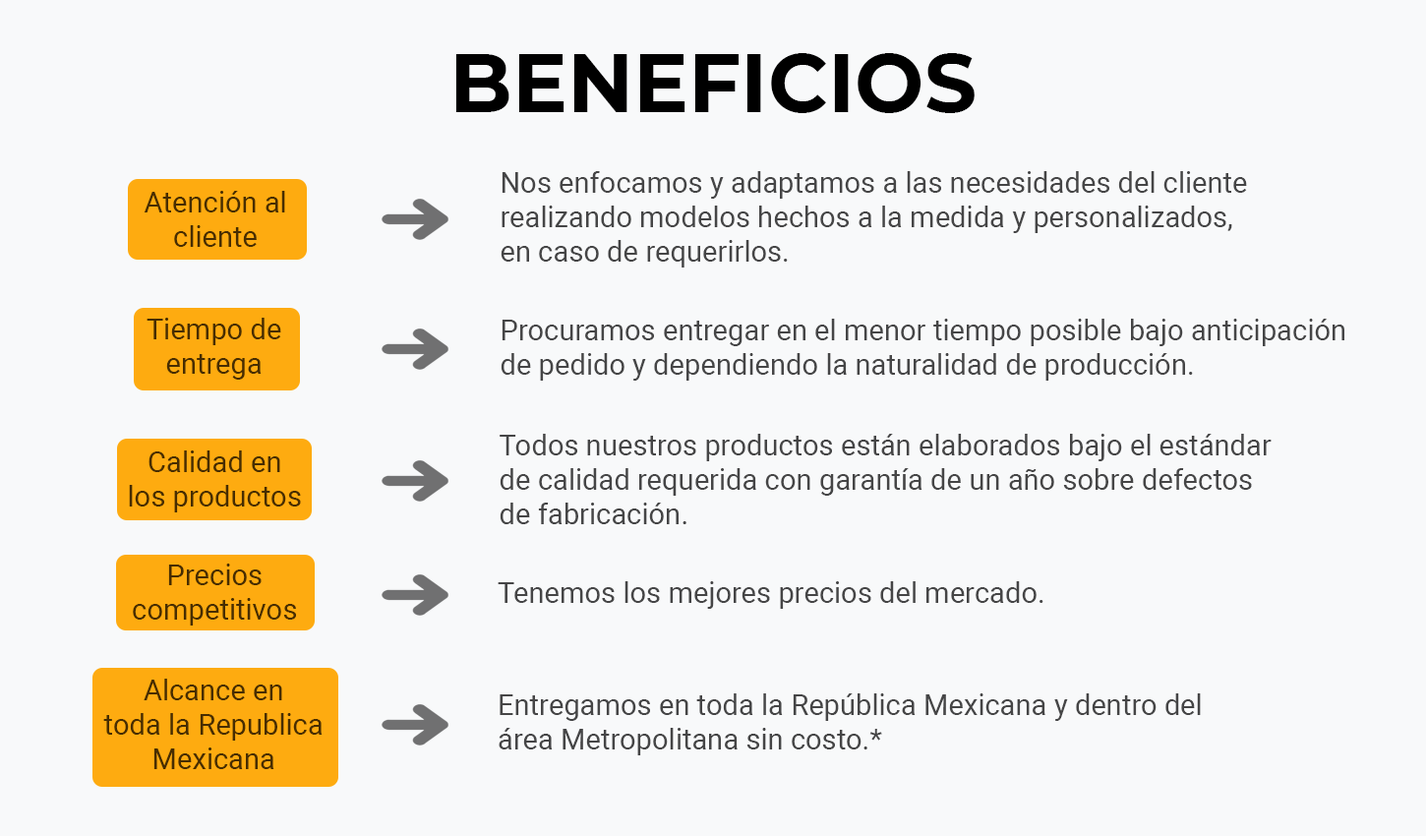
<style>
.page{position:relative;width:1426px;height:836px;background:#f8f9fa}
.page>*{position:absolute;margin:0}
.t1{font:82px "Montserrat-Bold";color:#000000}
.t2{font:28.7px "Roboto-Regular";color:#454546}
.t3{font:28.7px "Roboto-Regular";color:#472d02}
</style>
<div class="page">
<p class="t1" style="left:455px;top:53px;width:520px;height:60px">BENEFICIOS</p>
<p class="t2" style="left:501px;top:171px;width:746px;height:97px">Nos enfocamos y adaptamos a las necesidades del cliente<br>realizando modelos hechos a la medida y personalizados,<br>en caso de requerirlos.</p>
<p class="t3" style="left:144px;top:191px;width:141px;height:56px;text-align:center">Atención al<br>cliente</p>
<p class="t3" style="left:147px;top:318px;width:134px;height:62px;text-align:center">Tiempo de<br>entrega</p>
<p class="t2" style="left:501px;top:319px;width:844px;height:62px">Procuramos entregar en el menor tiempo posible bajo anticipación<br>de pedido y dependiendo la naturalidad de producción.</p>
<p class="t2" style="left:500px;top:434px;width:772px;height:90px">Todos nuestros productos están elaborados bajo el estándar<br>de calidad requerida con garantía de un año sobre defectos<br>de fabricación.</p>
<p class="t3" style="left:129px;top:450px;width:172px;height:62px;text-align:center">Calidad en<br>los productos</p>
<p class="t3" style="left:133px;top:564px;width:163px;height:62px;text-align:center">Precios<br>competitivos</p>
<p class="t2" style="left:498px;top:581px;width:546px;height:28px">Tenemos los mejores precios del mercado.</p>
<p class="t3" style="left:103px;top:679px;width:220px;height:90px;text-align:center">Alcance en<br>toda la Republica<br>Mexicana</p>
<p class="t2" style="left:499px;top:693px;width:702px;height:62px">Entregamos en toda la República Mexicana y dentro del<br>área Metropolitana sin costo.*</p>
</div>
